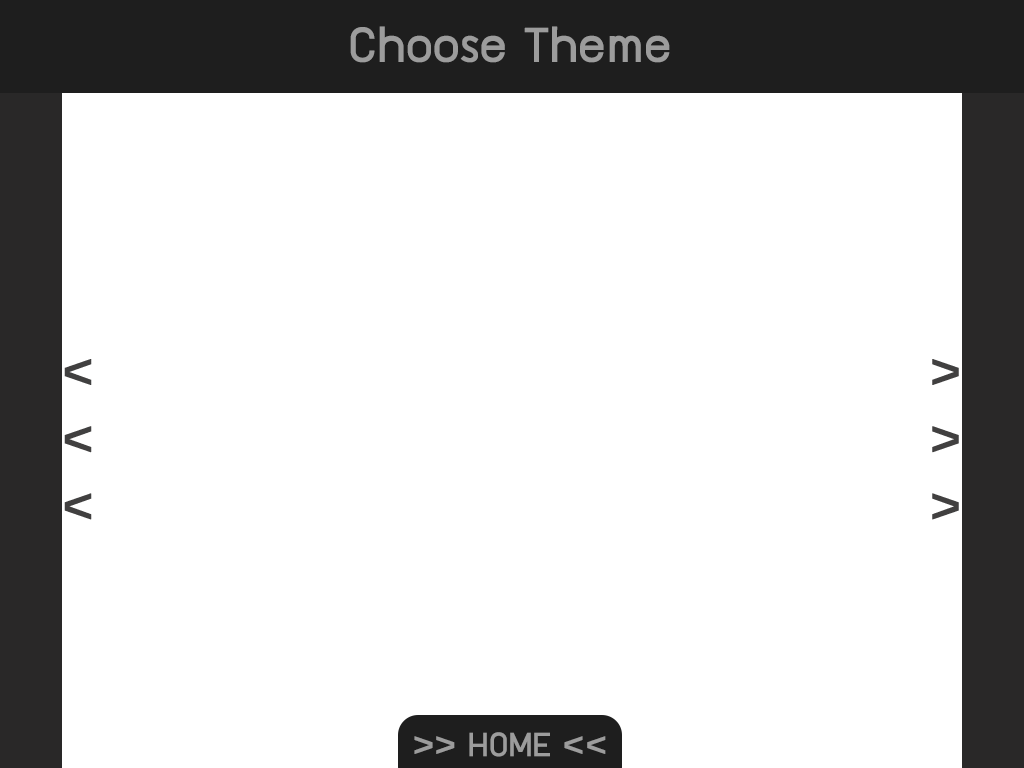
<style>
.page{position:relative;width:1024px;height:768px;background:#ffffff}
.page>*{position:absolute;margin:0}
.t1{font:56px "supermarket";color:#9c9c9c;font-weight:bold}
.t2{font:56px "supermarket";color:#414040;font-weight:bold}
.t3{font:38px "supermarket";color:#9c9c9c;font-weight:bold}
</style>
<div class="page">
<p class="t1" style="left:350px;top:26px;width:320px;height:37px">Choose Theme</p>
<p class="t2" style="left:64px;top:359px;width:28px;height:161px">&lt;<br>&lt;<br>&lt;</p>
<p class="t2" style="left:932px;top:359px;width:27px;height:161px">&gt;<br>&gt;<br>&gt;</p>
<p class="t3" style="left:414px;top:732px;width:192px;height:25px">&gt;&gt; HOME &lt;&lt;</p>
</div>
